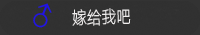
<style>
.page{position:relative;width:200px;height:35px;background:#313131}
.page>*{position:absolute;margin:0}
.t1{font:37.4px "AdobeHeitiStd-Regular";color:#2011eb}
.t2{font:19.3px "HYQiHeiY1-CEW";color:#efeded;scale:0.76 1}
</style>
<div class="page">
<p class="t1" style="left:33px;top:3px;width:19px;height:25px;rotate:23deg">♂</p>
<p class="t2" style="left:72px;top:8px;width:59px;height:18px;rotate:-1deg">嫁给我吧</p>
</div>
